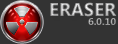
<style>
.page{position:relative;width:118px;height:44px;background:#333333}
.page>*{position:absolute;margin:0}
.t1{font:18.4px "SegoeUI-Bold"}
.t2{font:10px "SegoeUI-Bold";color:#a0a0a0}
</style>
<div class="page">
<p class="t1" style="left:50px;top:2px;width:67px;height:15px">ERASER</p>
<p class="t2" style="left:88px;top:18px;width:28px;height:7px">6.0.10</p>
</div>
